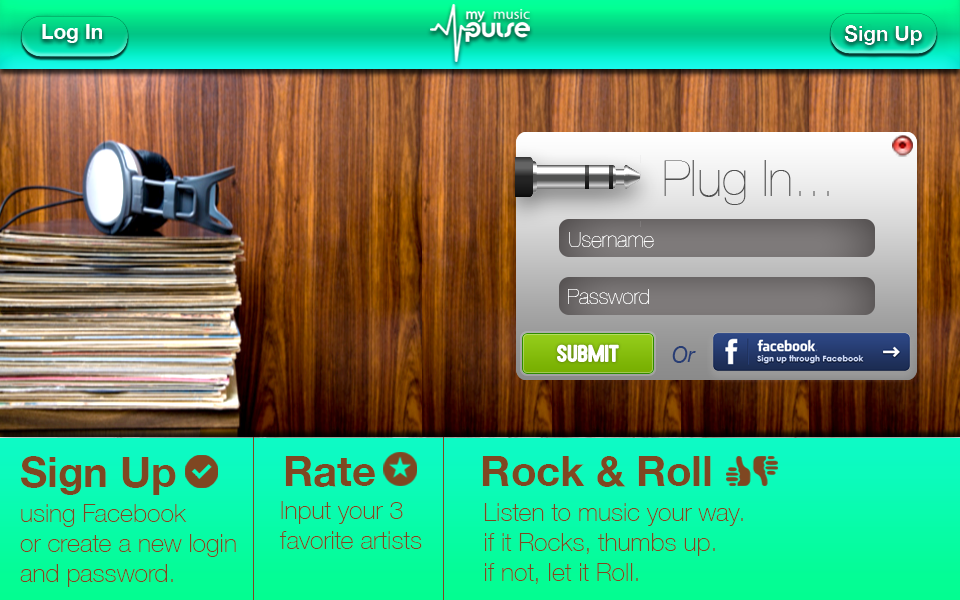
<style>
.page{position:relative;width:960px;height:600px}
.page>*{position:absolute;margin:0}
.t1{font:50px "HelveticaNeue-UltraLight";color:#515151}
.t2{font:20.8px "HelveticaNeue-UltraLight";color:#ffffff}
.t3{font:20.8px "HelveticaNeue-Italic";color:#283e76}
.t4{font:41.7px "HelveticaNeue-Bold";color:#7f4722}
.t5{font:25px "HelveticaNeue-Thin";color:#7f4722}
</style>
<div class="page">
<p class="t1" style="left:664px;top:160px;width:165px;height:45px">Plug In...</p>
<p class="t2" style="left:569px;top:232px;width:85px;height:16px">Username</p>
<p class="t2" style="left:569px;top:232px;width:85px;height:16px">Username</p>
<p class="t2" style="left:568px;top:289px;width:81px;height:15px">Password</p>
<p class="t3" style="left:672px;top:346px;width:24px;height:17px">Or</p>
<p class="t3" style="left:672px;top:346px;width:24px;height:17px">Or</p>
<p class="t4" style="left:21px;top:456px;width:155px;height:39px">Sign Up</p>
<p class="t4" style="left:285px;top:456px;width:90px;height:31px">Rate</p>
<p class="t4" style="left:482px;top:456px;width:229px;height:31px">Rock &amp; Roll</p>
<p class="t5" style="left:20px;top:504px;width:216px;height:83px">using Facebook<br>or create a new login <br>and password.</p>
<p class="t5" style="left:279px;top:501px;width:143px;height:48px">Input your 3 <br>favorite artists</p>
<p class="t5" style="left:484px;top:503px;width:259px;height:81px">Listen to music your way.<br>if it Rocks, thumbs up.<br>if not, let it Roll.</p>
</div>
